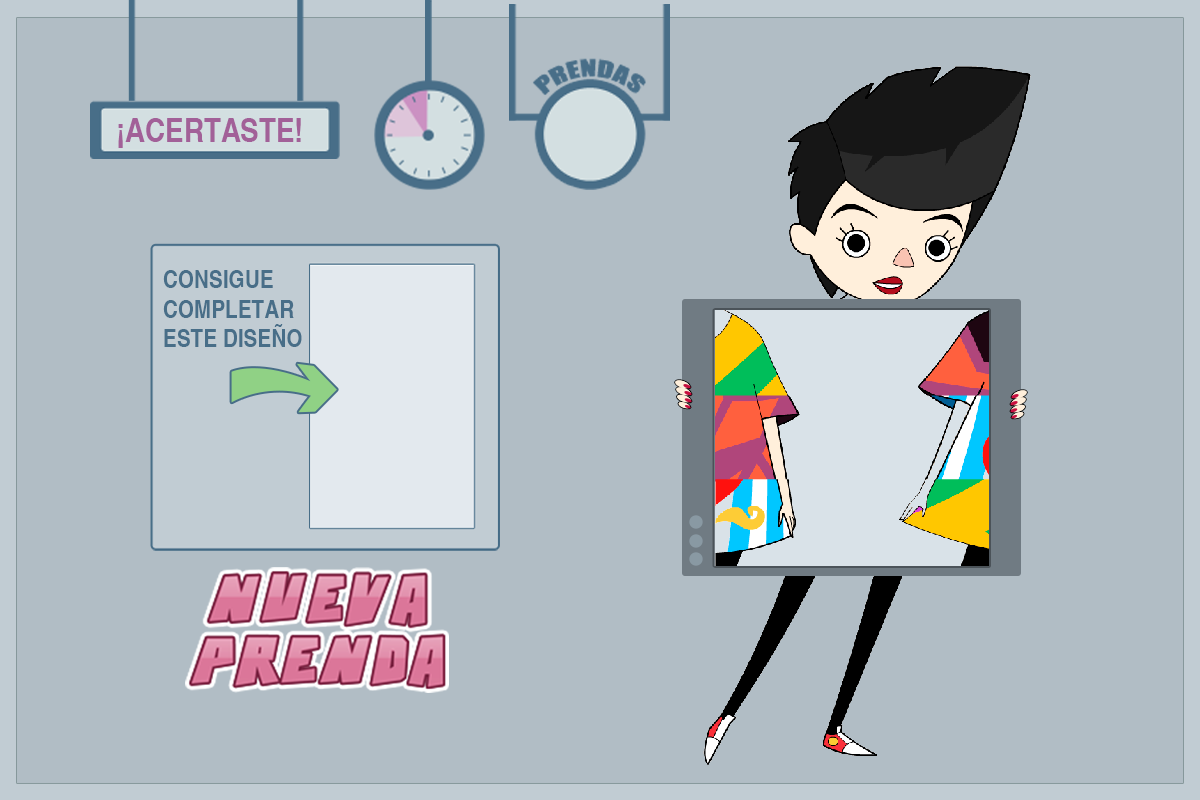
<style>
.page{position:relative;width:1200px;height:800px;background:#b1bdc5}
.page>*{position:absolute;margin:0}
.t1{font:33.1px "Helvetica-Narrow-Bold";color:#a26098;text-transform:uppercase}
.t2{font:24.9px/29.4px "Helvetica-Narrow-Bold";color:#486e88;text-transform:uppercase}
</style>
<div class="page">
<p class="t1" style="left:118px;top:118px;width:183px;height:30px">¡acertaste!</p>
<p class="t2" style="left:163px;top:270px;width:139px;height:77px">Consigue<br>completar<br>este diseño</p>
</div>
